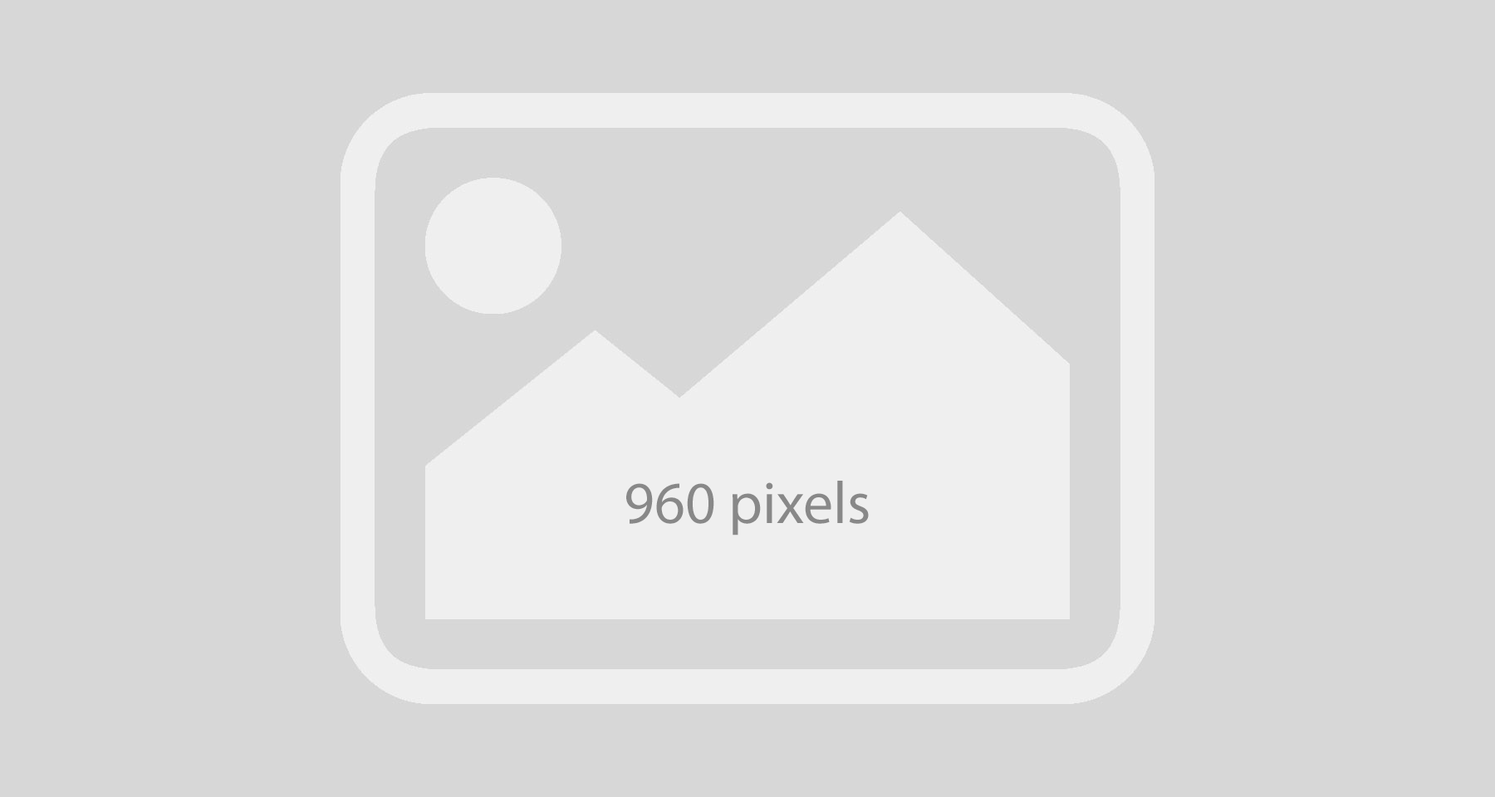
<style>
.page{position:relative;width:1495px;height:797px;background:#d7d7d7}
.page>*{position:absolute;margin:0}
.t1{font:59.8px "MyriadPro-Regular";color:#888888}
</style>
<div class="page">
<p class="t1" style="left:626px;top:481px;width:243px;height:55px">960 pixels</p>
</div>
